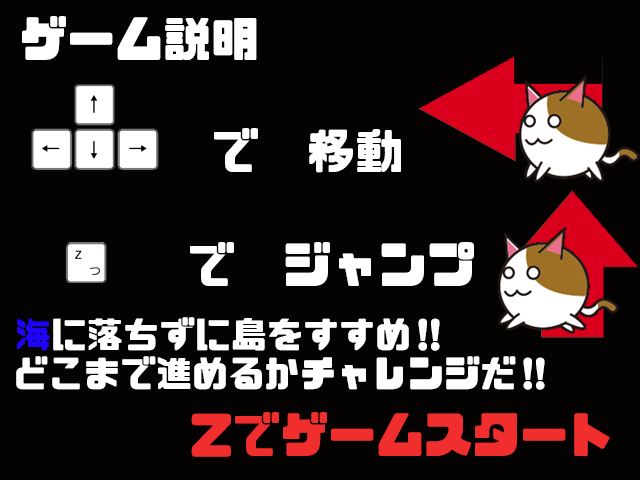
<style>
.page{position:relative;width:640px;height:480px;background:#050202}
.page>*{position:absolute;margin:0}
.t1{font:48px "CP-Font";color:#ffffff}
.t2{font:36px "CP-Font";color:#ffffff}
.t3{font:36px "CP-Font";color:#1f02fa}
.t4{font:48px "CP-Font";color:#f02e2e}
</style>
<div class="page">
<p class="t1" style="left:22px;top:16px;width:235px;height:44px">ゲーム説明</p>
<p class="t1" style="left:214px;top:128px;width:187px;height:45px">で　移動</p>
<p class="t1" style="left:190px;top:242px;width:284px;height:44px">で　ジャンプ</p>
<p class="t2" style="left:17px;top:317px;width:423px;height:34px"><span class="t3">海</span>に落ちずに島をすすめ‼︎</p>
<p class="t2" style="left:16px;top:356px;width:529px;height:34px">どこまで進めるかチャレンジだ‼︎</p>
<p class="t4" style="left:191px;top:412px;width:419px;height:45px">Zでゲームスタート</p>
</div>
